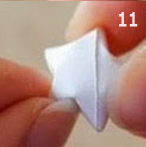
<style>
.page{position:relative;width:146px;height:147px}
.page>*{position:absolute;margin:0}
.t1{font:18.7px "Tahoma";color:#f3e3e2;font-weight:bold}
</style>
<div class="page">
<p class="t1" style="left:119px;top:12px;width:19px;height:15px">11</p>
</div>
